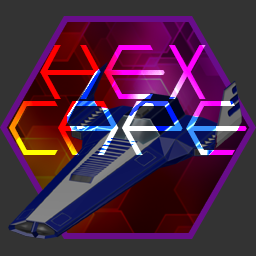
<style>
.page{position:relative;width:256px;height:256px;background:#333333}
.page>*{position:absolute;margin:0}
.t1{font:76px/56px "HONEYCOMBED";letter-spacing:0.05em}
</style>
<div class="page">
<p class="t1" style="left:9px;top:45px;width:238px;height:110px;text-align:center">hex <br>cape</p>
</div>
